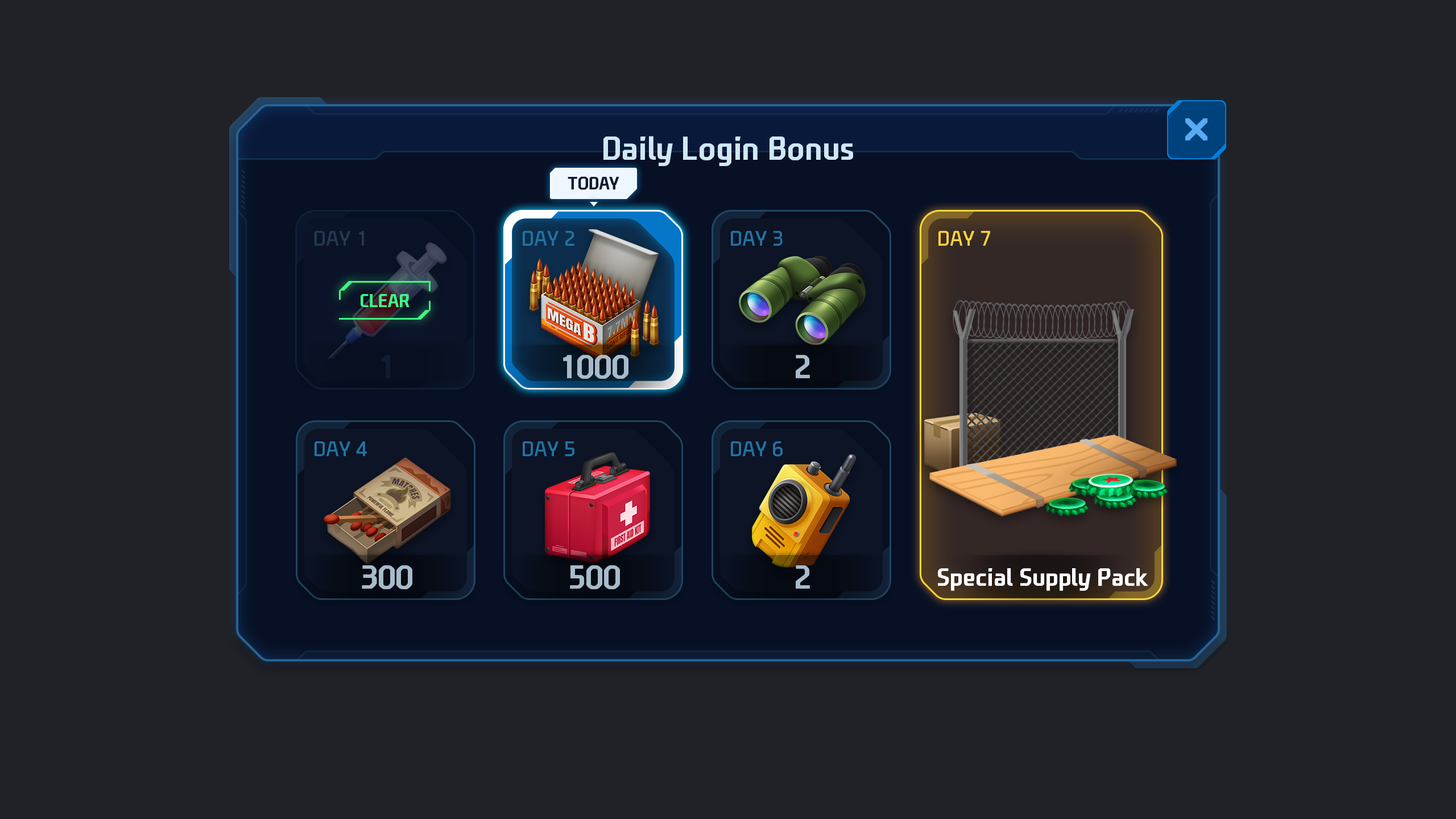
<style>
.page{position:relative;width:1456px;height:819px;background:#212227}
.page>*{position:absolute;margin:0}
.t1{font:31.8px "NEXONFootballGothicB";color:#cfe7f7}
.t2{font:17.2px "NEXONFootballGothicB";color:#0d1b2e;text-transform:uppercase}
.t3{font:20.5px "NEXONFootballGothicL";color:#243950;text-transform:uppercase}
.t4{font:20.5px "NEXONFootballGothicL";color:#2273a2;text-transform:uppercase}
.t5{font:20.5px "NEXONFootballGothicL";color:#ffd539;text-transform:uppercase}
.t6{font:18.1px "NEXONFootballGothicB";color:#3eff85;text-transform:uppercase}
.t7{font:31.8px "NEXONFootballGothicB";color:#101c32;text-transform:uppercase}
.t8{font:31.8px "NEXONFootballGothicB";color:#a7bbca;text-transform:uppercase}
.t9{font:23.9px "NEXONFootballGothicB";color:#ffffff}
</style>
<div class="page">
<p class="t1" style="left:603px;top:136px;width:250px;height:30px">Daily Login Bonus</p>
<p class="t2" style="left:568px;top:176px;width:51px;height:14px">Today</p>
<p class="t3" style="left:315px;top:231px;width:49px;height:15px">Day 1</p>
<p class="t4" style="left:523px;top:231px;width:51px;height:15px">Day 2</p>
<p class="t4" style="left:731px;top:231px;width:52px;height:15px">Day 3</p>
<p class="t5" style="left:938px;top:231px;width:52px;height:15px">Day 7</p>
<p class="t6" style="left:361px;top:294px;width:48px;height:13px">Clear</p>
<p class="t7" style="left:382px;top:355px;width:8px;height:23px">1</p>
<p class="t8" style="left:563px;top:355px;width:65px;height:24px">1000</p>
<p class="t8" style="left:796px;top:355px;width:14px;height:23px">2</p>
<p class="t4" style="left:315px;top:441px;width:52px;height:15px">Day 4</p>
<p class="t4" style="left:523px;top:441px;width:51px;height:15px">Day 5</p>
<p class="t4" style="left:731px;top:441px;width:52px;height:16px">Day 6</p>
<p class="t8" style="left:362px;top:565px;width:50px;height:24px">300</p>
<p class="t8" style="left:570px;top:565px;width:50px;height:24px">500</p>
<p class="t8" style="left:796px;top:565px;width:14px;height:24px">2</p>
<p class="t9" style="left:938px;top:568px;width:210px;height:23px">Special Supply Pack</p>
</div>
